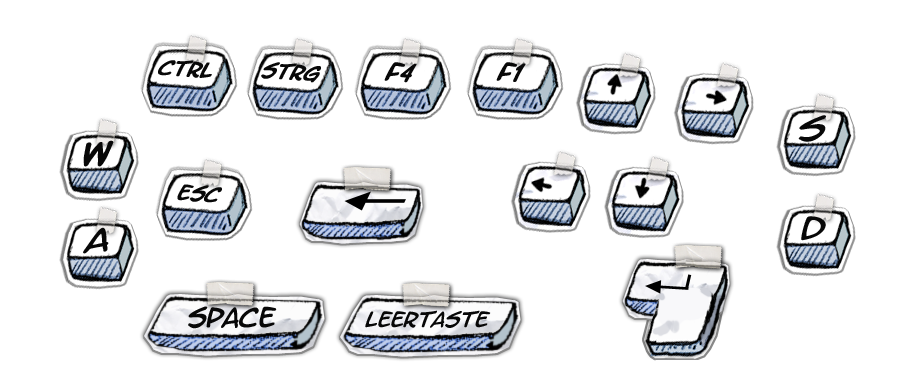
<style>
.page{position:relative;width:900px;height:371px;background:#ffffff}
.page>*{position:absolute;margin:0}
.t1{font:20.1px "LetterOMatic";color:#080808;font-weight:bold;scale:0.87 1}
.t2{font:20.4px "LetterOMatic";color:#080808;font-weight:bold;scale:0.85 1}
.t3{font:23.9px "LetterOMatic";color:#080808;font-weight:bold;scale:0.85 1}
.t4{font:29.3px "LetterOMatic";color:#080808;scale:1.19 1}
.t5{font:24.6px "LetterOMatic";color:#080808}
.t6{font:19.9px "LetterOMatic";color:#080808;scale:0.93 1}
</style>
<div class="page">
<p class="t1" style="left:158px;top:60px;width:54px;height:18px;rotate:4deg">Ctrl</p>
<p class="t2" style="left:261px;top:62px;width:60px;height:21px;rotate:4deg">Strg</p>
<p class="t3" style="left:384px;top:62px;width:33px;height:21px;rotate:4deg">F4</p>
<p class="t3" style="left:496px;top:62px;width:30px;height:20px;rotate:4deg">F1</p>
<p class="t4" style="left:798px;top:115px;width:28px;height:27px;rotate:-4deg">S</p>
<p class="t4" style="left:83px;top:140px;width:31px;height:27px;rotate:-4deg">W</p>
<p class="t2" style="left:177px;top:184px;width:45px;height:19px;rotate:4deg">Esc</p>
<p class="t4" style="left:801px;top:216px;width:25px;height:25px;rotate:-4deg">D</p>
<p class="t4" style="left:83px;top:227px;width:26px;height:27px;rotate:-4deg">A</p>
<p class="t5" style="left:188px;top:306px;width:89px;height:23px">Space</p>
<p class="t6" style="left:365px;top:310px;width:126px;height:18px">Leertaste</p>
</div>
